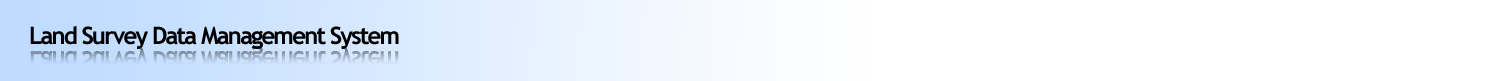
<style>
.page{position:relative;width:1500px;height:81px;background:#ffffff}
.page>*{position:absolute;margin:0}
.t1{font:24px "TrebuchetMS-Bold";letter-spacing:-0.075em;color:#000000}
.t2{font:26.6px "TrebuchetMS-Bold";letter-spacing:-0.075em;scale:0.9 1}
</style>
<div class="page">
<p class="t1" style="left:30px;top:26px;width:369px;height:23px">Land Survey Data Management System</p>
<p class="t2" style="left:30px;top:45px;width:369px;height:26px">Land Survey Data Management System</p>
</div>
